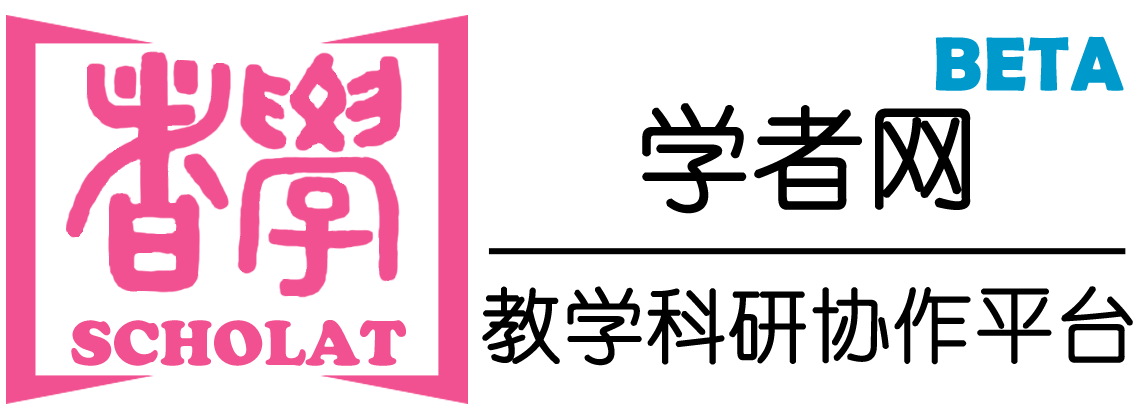
<style>
.page{position:relative;width:1134px;height:416px;background:#ffffff}
.page>*{position:absolute;margin:0}
.t1{font:76px "BerlinSansFBDemi-Bold";color:#0099cc;font-weight:bold}
.t2{font:112px "YouYuan";color:#000000;font-weight:bold}
.t3{font:80px "YouYuan";color:#000000;font-weight:bold}
</style>
<div class="page">
<p class="t1" style="left:935px;top:36px;width:189px;height:55px">BETA</p>
<p class="t2" style="left:642px;top:103px;width:329px;height:111px">学者网</p>
<p class="t3" style="left:482px;top:286px;width:651px;height:80px">教学科研协作平台</p>
</div>
